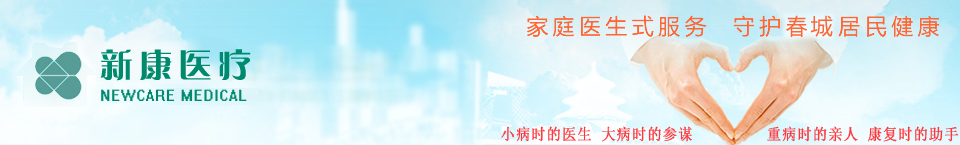
<style>
.page{position:relative;width:960px;height:145px}
.page>*{position:absolute;margin:0}
.t1{font:33px "FZCQJW--GB1-0";letter-spacing:0.2em;color:#008a6d}
.t2{font:18px "System";letter-spacing:0.05em;color:#00896e;scale:0.9 1}
.t3{font:16px "System";letter-spacing:0.05em;color:#ff373c;scale:0.9 1}
</style>
<div class="page">
<p class="t1" style="left:100px;top:49px;width:151px;height:32px">新康医疗</p>
<p class="t2" style="left:101px;top:89px;width:146px;height:12px">NEWCARE MEDICAL</p>
<p class="t3" style="left:501px;top:126px;width:458px;height:16px">小病时的医生  大病时的参谋                 重病时的亲人  康复时的助手</p>
</div>
